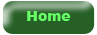
<style>
.page{position:relative;width:97px;height:35px;background:#276027}
.page>*{position:absolute;margin:0}
.t1{font:14px "Arial-Black";color:#66ff66}
</style>
<div class="page">
<p class="t1" style="left:27px;top:11px;width:44px;height:10px">Home</p>
</div>
